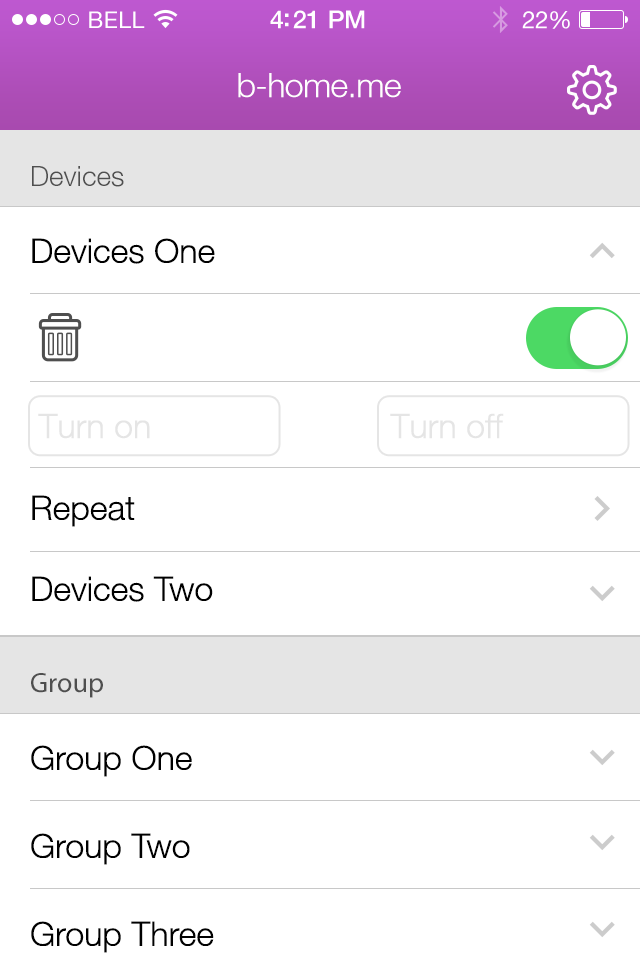
<style>
.page{position:relative;width:640px;height:960px;background:#ffffff}
.page>*{position:absolute;margin:0}
.t1{font:34px "HelveticaNeueLT-Light";letter-spacing:-0.02em;color:#fffefe}
.t2{font:28px "HelveticaNeueLT-Light";color:#4f4f4f}
.t3{font:34px "HelveticaNeueLT-Light";color:#000000}
.t4{font:34px "HelveticaNeueLT-Light";color:#e5e5e5}
.t5{font:28px "MyriadPro-Regular";color:#4f4f4f}
</style>
<div class="page">
<p class="t1" style="left:238px;top:73px;width:163px;height:25px">b-home.me</p>
<p class="t2" style="left:32px;top:166px;width:92px;height:21px">Devices</p>
<p class="t3" style="left:32px;top:238px;width:183px;height:26px">Devices One</p>
<p class="t4" style="left:38px;top:413px;width:112px;height:26px">Turn on</p>
<p class="t4" style="left:390px;top:413px;width:114px;height:26px">Turn off</p>
<p class="t3" style="left:32px;top:495px;width:103px;height:32px">Repeat</p>
<p class="t3" style="left:32px;top:576px;width:181px;height:26px">Devices Two</p>
<p class="t5" style="left:31px;top:673px;width:72px;height:25px">Group</p>
</div>
